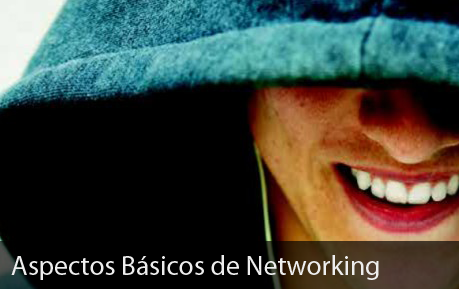
<style>
.page{position:relative;width:459px;height:289px;background:#000000}
.page>*{position:absolute;margin:0}
.t1{font:27.4px "MyriadPro-Regular";color:#eeeeee}
</style>
<div class="page">
<p class="t1" style="left:11px;top:255px;width:368px;height:25px">Aspectos Básicos de Networking</p>
</div>
